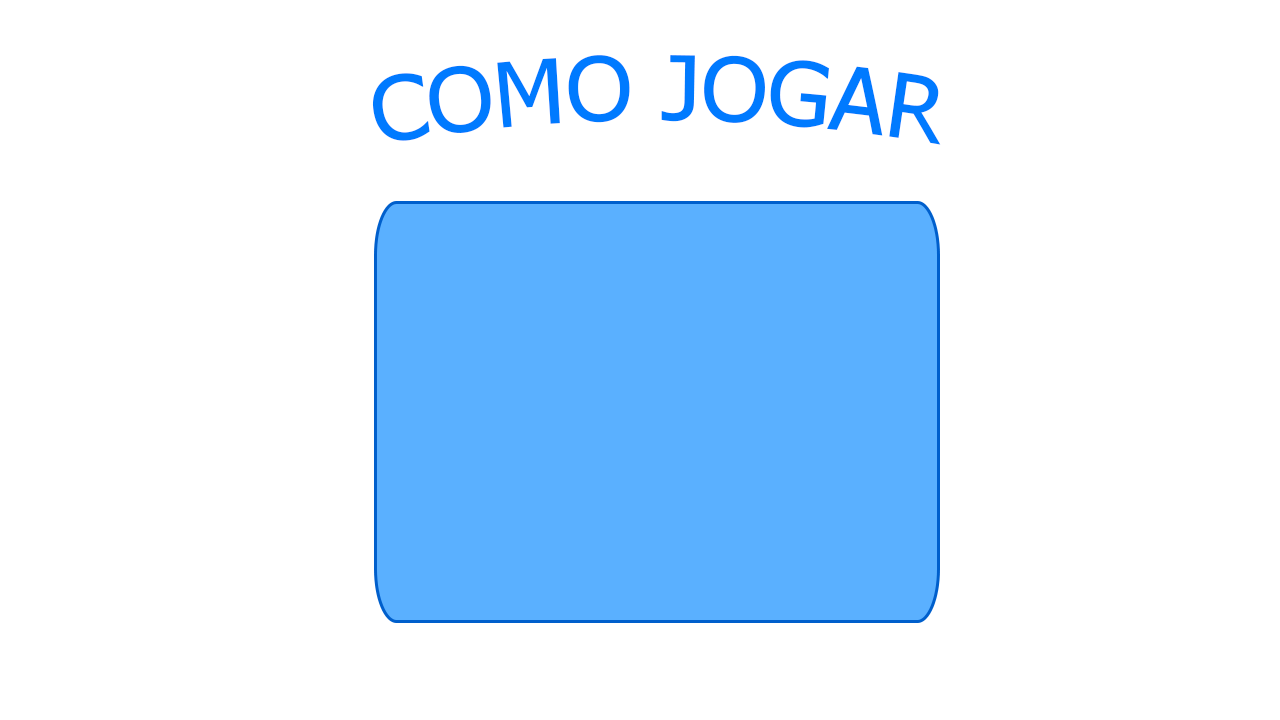
<style>
.page{position:relative;width:1280px;height:720px;background:#ffffff}
.page>*{position:absolute;margin:0}
.t1{font:90px "Tahoma";color:#007aff}
</style>
<div class="page">
<p class="t1" style="left:372px;top:55px;width:569px;height:90px">COMO JOGAR</p>
</div>
